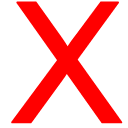
<style>
.page{position:relative;width:128px;height:128px;background:#ffffff}
.page>*{position:absolute;margin:0}
.t1{font:168px "ArialMT";color:#ff0000;font-weight:bold}
</style>
<div class="page">
<p class="t1" style="left:11px;top:1px;width:112px;height:123px">X</p>
</div>
